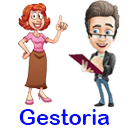
<style>
.page{position:relative;width:128px;height:128px;background:#ffffff}
.page>*{position:absolute;margin:0}
.t1{font:21.8px "ArialRoundedMTBold";color:#070cf5}
</style>
<div class="page">
<p class="t1" style="left:19px;top:109px;width:91px;height:16px">Gestoria</p>
</div>
